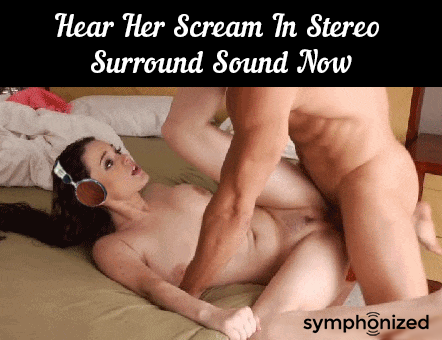
<style>
.page{position:relative;width:442px;height:340px;background:#000000}
.page>*{position:absolute;margin:0}
.t1{font:30.1px/36.2px "NautilusPompilius";color:#ffffff}
</style>
<div class="page">
<p class="t1" style="left:55px;top:13px;width:324px;height:60px;text-align:center">Hear Her Scream In Stereo <br>Surround Sound Now</p>
</div>
